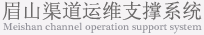
<style>
.page{position:relative;width:204px;height:35px;background:#f5f3f5}
.page>*{position:absolute;margin:0}
.t1{font:20px "SimSun";color:#6c6a6a}
.t2{font:10.5px "PlantagenetCherokee";color:#93929a}
</style>
<div class="page">
<p class="t1" style="left:2px;top:1px;width:200px;height:20px">眉山渠道运维支撑系统</p>
<p class="t2" style="left:3px;top:22px;width:199px;height:12px">Meishan channel operation support system</p>
</div>
